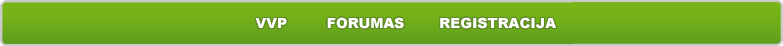
<style>
.page{position:relative;width:783px;height:46px;background:#77b417}
.page>*{position:absolute;margin:0}
.t1{font:14px "Arial-Black";color:#ffffff}
.t2{font:14px "Verdana-Bold";color:#000000}
</style>
<div class="page">
<p class="t1" style="left:255px;top:17px;width:301px;height:12px"><span class="t2">    </span>VVP     FORUMAS      REGISTRACIJA</p>
</div>
